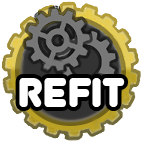
<style>
.page{position:relative;width:142px;height:142px;background:#ffffff}
.page>*{position:absolute;margin:0}
.t1{font:48px "Junegull";color:#ffffff}
</style>
<div class="page">
<p class="t1" style="left:19px;top:78px;width:106px;height:29px">REFIT</p>
</div>
